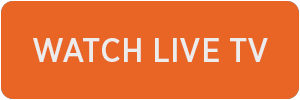
<style>
.page{position:relative;width:300px;height:100px;background:#e86525}
.page>*{position:absolute;margin:0}
.t1{font:32px "GothamNarrowSSm-Medium";color:#ececec}
</style>
<div class="page">
<p class="t1" style="left:33px;top:38px;width:235px;height:24px">WATCH LIVE TV</p>
</div>
